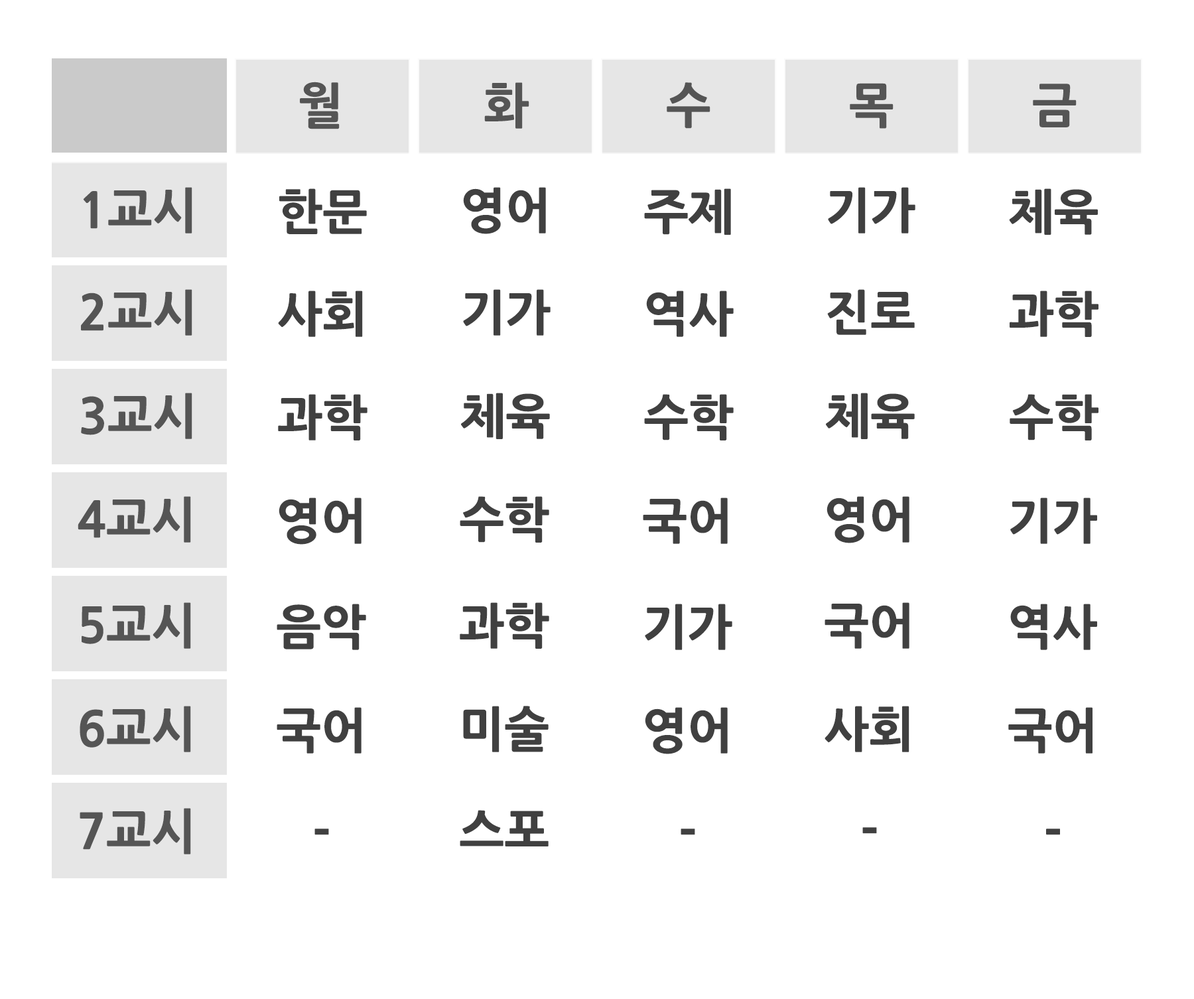
<style>
.page{position:relative;width:1194px;height:999px;background:#ffffff}
.page>*{position:absolute;margin:0}
.t1{font:47.8px "NanumGothicExtraBold";color:#555555}
.t2{font:47.8px "NanumGothicExtraBold";color:#404040}
</style>
<div class="page">
<p class="t1" style="left:300px;top:82px;width:40px;height:47px">월</p>
<p class="t1" style="left:484px;top:82px;width:45px;height:47px">화</p>
<p class="t1" style="left:667px;top:82px;width:43px;height:47px">수</p>
<p class="t1" style="left:850px;top:83px;width:43px;height:46px">목</p>
<p class="t1" style="left:1033px;top:84px;width:43px;height:43px">금</p>
<p class="t1" style="left:83px;top:187px;width:109px;height:46px">1교시</p>
<p class="t2" style="left:279px;top:188px;width:88px;height:46px">한문</p>
<p class="t2" style="left:463px;top:187px;width:83px;height:47px">영어</p>
<p class="t2" style="left:644px;top:188px;width:87px;height:47px">주제</p>
<p class="t2" style="left:828px;top:187px;width:87px;height:46px">기가</p>
<p class="t2" style="left:1009px;top:188px;width:89px;height:47px">체육</p>
<p class="t1" style="left:81px;top:289px;width:111px;height:47px">2교시</p>
<p class="t2" style="left:278px;top:290px;width:85px;height:47px">사회</p>
<p class="t2" style="left:463px;top:289px;width:87px;height:47px">기가</p>
<p class="t2" style="left:646px;top:290px;width:88px;height:47px">역사</p>
<p class="t2" style="left:827px;top:289px;width:88px;height:46px">진로</p>
<p class="t2" style="left:1009px;top:290px;width:89px;height:47px">과학</p>
<p class="t1" style="left:81px;top:393px;width:111px;height:46px">3교시</p>
<p class="t2" style="left:278px;top:394px;width:89px;height:46px">과학</p>
<p class="t2" style="left:461px;top:393px;width:89px;height:46px">체육</p>
<p class="t2" style="left:644px;top:394px;width:90px;height:46px">수학</p>
<p class="t2" style="left:826px;top:393px;width:89px;height:46px">체육</p>
<p class="t2" style="left:1009px;top:394px;width:89px;height:46px">수학</p>
<p class="t1" style="left:78px;top:496px;width:113px;height:47px">4교시</p>
<p class="t2" style="left:279px;top:497px;width:82px;height:48px">영어</p>
<p class="t2" style="left:460px;top:496px;width:89px;height:47px">수학</p>
<p class="t2" style="left:643px;top:497px;width:85px;height:47px">국어</p>
<p class="t2" style="left:826px;top:496px;width:83px;height:47px">영어</p>
<p class="t2" style="left:1010px;top:497px;width:87px;height:47px">기가</p>
<p class="t1" style="left:82px;top:602px;width:109px;height:47px">5교시</p>
<p class="t2" style="left:277px;top:604px;width:89px;height:46px">음악</p>
<p class="t2" style="left:460px;top:602px;width:89px;height:47px">과학</p>
<p class="t2" style="left:645px;top:604px;width:87px;height:46px">기가</p>
<p class="t2" style="left:824px;top:602px;width:85px;height:47px">국어</p>
<p class="t2" style="left:1010px;top:604px;width:87px;height:46px">역사</p>
<p class="t1" style="left:80px;top:706px;width:111px;height:46px">6교시</p>
<p class="t2" style="left:277px;top:707px;width:84px;height:46px">국어</p>
<p class="t2" style="left:463px;top:706px;width:85px;height:46px">미술</p>
<p class="t2" style="left:645px;top:707px;width:83px;height:47px">영어</p>
<p class="t2" style="left:824px;top:706px;width:85px;height:46px">사회</p>
<p class="t2" style="left:1008px;top:707px;width:84px;height:46px">국어</p>
<p class="t1" style="left:80px;top:808px;width:111px;height:46px">7교시</p>
<p class="t2" style="left:460px;top:810px;width:88px;height:36px">스포</p>
<p class="t2" style="left:314px;top:828px;width:15px;height:7px">-</p>
<p class="t2" style="left:680px;top:828px;width:15px;height:7px">-</p>
<p class="t2" style="left:862px;top:827px;width:15px;height:7px">-</p>
<p class="t2" style="left:1046px;top:828px;width:14px;height:7px">-</p>
</div>
